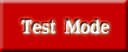
<style>
.page{position:relative;width:128px;height:52px;background:#c80000}
.page>*{position:absolute;margin:0}
.t1{font:18px "MyungjoXB-HM"}
</style>
<div class="page">
<p class="t1" style="left:21px;top:19px;width:88px;height:15px">Test Mode</p>
</div>
